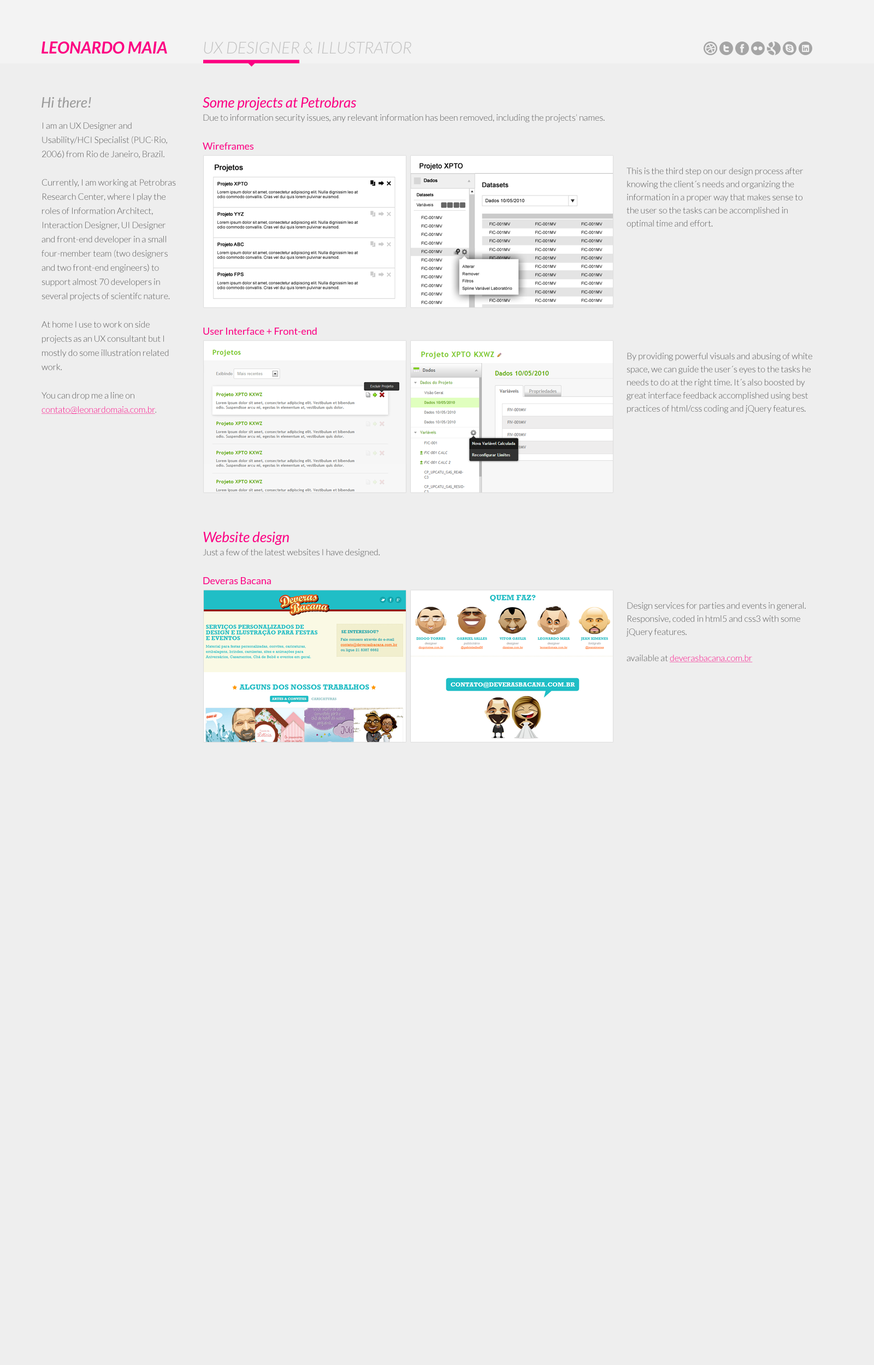
<style>
.page{position:relative;width:874px;height:1365px;background:#eeeeee}
.page>*{position:absolute;margin:0}
.t1{font:16.4px "Lato-BoldItalic";color:#fc0082}
.t2{font:16.4px "Lato-LightItalic";color:#c2c2c2}
.t3{font:14.2px "Lato-Italic";color:#999999}
.t4{font:14.2px "Lato-Italic";color:#fc0082}
.t5{font:8.7px/14.2px "Lato-Light";color:#515151}
.t6{font:8.7px/14.2px "Lato-Light";color:#fc0082;text-decoration:underline}
.t7{font:8.7px/14.2px "Lato-Light";color:#746c6c}
.t8{font:8.7px "Lato-Light";color:#505050}
.t9{font:9.8px "Lato-Regular";color:#fc0082}
.t10{font:8.7px/13.1px "Lato-Light";color:#505050}
.t11{font:8.7px/13.1px "Lato-Light";color:#fc0082;text-decoration:underline}
</style>
<div class="page">
<p class="t1" style="left:41px;top:41px;width:126px;height:13px">LEONARDO MAIA</p>
<p class="t2" style="left:204px;top:41px;width:207px;height:13px">UX DESIGNER &amp; ILLUSTRATOR</p>
<p class="t3" style="left:41px;top:97px;width:50px;height:11px">Hi there!</p>
<p class="t4" style="left:203px;top:97px;width:153px;height:13px">Some projects at Petrobras</p>
<p class="t5" style="left:41px;top:122px;width:135px;height:292px">I am an UX Designer and Usability/HCI Specialist (PUC-Rio, 2006) from Rio de Janeiro, Brazil.<br><br>Currently, I am working at Petrobras Research Center, where I play the roles of Information Architect, Interaction Designer, UI Designer and front-end developer in a small four-member team (two designers and two front-end engineers) to support almost 70 developers in several projects of scientifc nature.<br><br>At home I use to work on side projects as an UX consultant but I mostly do some illustration related work.<br><br>You can drop me a line on <span class="t6">contato@leonardomaia.com.br</span><span class="t7">.</span></p>
<p class="t8" style="left:203px;top:114px;width:401px;height:8px">Due to information security issues, any relevant information has been removed, including the projects’ names.</p>
<p class="t9" style="left:203px;top:142px;width:50px;height:8px">Wireframes</p>
<p class="t10" style="left:626px;top:168px;width:177px;height:60px">This is the third step on our design process after knowing the client´s needs and organizing the information in a proper way that makes sense to the user so the tasks can be accomplished in optimal time and effort.</p>
<p class="t9" style="left:203px;top:327px;width:114px;height:8px">User Interface + Front-end</p>
<p class="t10" style="left:626px;top:353px;width:186px;height:60px">By providing powerful visuals and abusing of white space, we can guide the user´s eyes to the tasks he needs to do at the right time. It´s also boosted by great interface feedback accomplished using best practices of html/css coding and jQuery features.</p>
<p class="t4" style="left:203px;top:531px;width:86px;height:14px">Website design</p>
<p class="t8" style="left:203px;top:549px;width:176px;height:8px">Just a few of the latest websites I have designed.</p>
<p class="t9" style="left:203px;top:577px;width:68px;height:8px">Deveras Bacana</p>
<p class="t10" style="left:626px;top:602px;width:179px;height:60px">Design services for parties and events in general. Responsive, coded in html5 and css3 with some jQuery features.<br><br>available at <span class="t11">deverasbacana.com.br</span></p>
</div>
